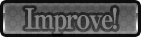
<style>
.page{position:relative;width:141px;height:37px}
.page>*{position:absolute;margin:0}
.t1{font:28px "RyuminPro-ExBold";letter-spacing:-0.08em;color:#878685;scale:0.9 1}
</style>
<div class="page">
<p class="t1" style="left:25px;top:7px;width:92px;height:27px">Improve!</p>
</div>
